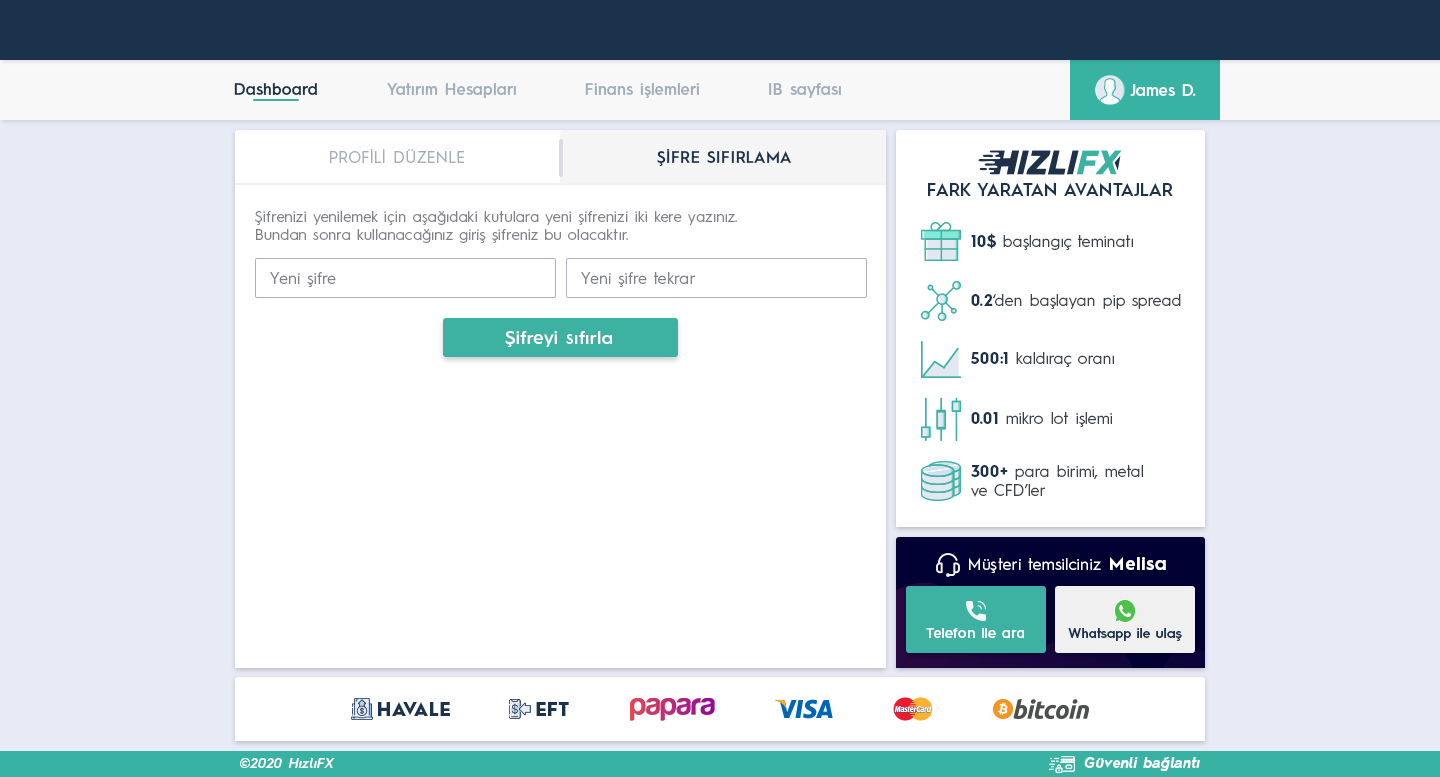
<style>
.page{position:relative;width:1440px;height:777px;background:#ffffff}
.page>*{position:absolute;margin:0}
.t1{font:16px "HurmeGeometricSans3-SemiBold";color:#1a324c}
.t2{font:16px "HurmeGeometricSans3-SemiBold";color:#a1adbb}
.t3{font:16px "HurmeGeometricSans3-SemiBold";color:#fefefe}
.t4{font:16px "HurmeGeometricSans1-Regular";letter-spacing:0.01em;color:#a1adbb}
.t5{font:16px "HurmeGeometricSans1-SemiBold";letter-spacing:0.01em;color:#1a324c}
.t6{font:18px "HurmeGeometricSans1-SemiBold";color:#1a324c}
.t7{font:15px "HurmeGeometricSans1-Regular";letter-spacing:0.01em;color:#7f8389}
.t8{font:16px "HurmeGeometricSans1-Regular";color:#3a4149}
.t9{font:16px "HurmeGeometricSans1-Bold";color:#1a324c}
.t10{font:16px "HurmeGeometricSans1-Regular";letter-spacing:0.01em;color:#7f8389}
.t11{font:18px "HurmeGeometricSans1-SemiBold";letter-spacing:0.025em;color:#ffffff}
.t12{font:16px "HurmeGeometricSans1-Regular";letter-spacing:0.025em;color:#ffffff}
.t13{font:18px "HurmeGeometricSans1-Bold";letter-spacing:0.05em;color:#ffffff}
.t14{font:14px "HurmeGeometricSans3-SemiBold";letter-spacing:0.01em;color:#ffffff}
.t15{font:13.5px "HurmeGeometricSans3-SemiBold";letter-spacing:0.01em;color:#1a324c}
.t16{font:18px "HurmeGeometricSans1-Black";letter-spacing:0.025em;color:#1a324c}
.t17{font:14px "HurmeGeometricSans2-SemiBoldObl";letter-spacing:0.025em;color:#ffffff}
.t18{font:14px "HurmeGeometricSans2-BoldObl";letter-spacing:0.025em;color:#ffffff}
</style>
<div class="page">
<p class="t1" style="left:234px;top:83px;width:83px;height:12px">Dashboard</p>
<p class="t2" style="left:387px;top:83px;width:129px;height:15px">Yatırım Hesapları</p>
<p class="t2" style="left:585px;top:83px;width:114px;height:15px">Finans işlemleri</p>
<p class="t2" style="left:769px;top:83px;width:72px;height:15px">IB sayfası</p>
<p class="t3" style="left:1130px;top:84px;width:66px;height:12px">James D.</p>
<p class="t4" style="left:330px;top:149px;width:135px;height:14px">PROFİLİ DÜZENLE</p>
<p class="t5" style="left:657px;top:148px;width:135px;height:18px">ŞİFRE SIFIRLAMA</p>
<p class="t6" style="left:928px;top:183px;width:245px;height:13px">FARK YARATAN AVANTAJLAR</p>
<p class="t7" style="left:255px;top:211px;width:482px;height:32px">Şifrenizi yenilemek için aşağıdaki kutulara yeni şifrenizi iki kere yazınız.<br>Bundan sonra kullanacağınız giriş şifreniz bu olacaktır.</p>
<p class="t8" style="left:971px;top:233px;width:162px;height:17px"><span class="t9">10$</span> başlangıç teminatı</p>
<p class="t10" style="left:270px;top:272px;width:66px;height:15px">Yeni şifre</p>
<p class="t10" style="left:581px;top:272px;width:114px;height:15px">Yeni şifre tekrar</p>
<p class="t8" style="left:971px;top:294px;width:210px;height:15px"><span class="t9">0.2</span>‘den başlayan pip spread</p>
<p class="t11" style="left:505px;top:331px;width:107px;height:16px">Şifreyi sıfırla</p>
<p class="t8" style="left:970px;top:352px;width:144px;height:15px"><span class="t9">500:1</span> kaldıraç oranı</p>
<p class="t8" style="left:971px;top:412px;width:141px;height:15px"><span class="t9">0.01</span> mikro lot işlemi</p>
<p class="t8" style="left:971px;top:465px;width:172px;height:32px"><span class="t9">300+</span> para birimi, metal<br>ve CFD’ler</p>
<p class="t12" style="left:969px;top:557px;width:197px;height:16px">Müşteri temsilciniz <span class="t13">Melisa</span></p>
<p class="t14" style="left:926px;top:628px;width:98px;height:10px">Telefon ile ara</p>
<p class="t15" style="left:1068px;top:628px;width:114px;height:13px">Whatsapp ile ulaş</p>
<p class="t16" style="left:378px;top:702px;width:72px;height:14px">HAVALE</p>
<p class="t16" style="left:536px;top:702px;width:33px;height:14px">EFT</p>
<p class="t17" style="left:240px;top:758px;width:95px;height:10px">©2020 HızlıFX</p>
<p class="t18" style="left:1084px;top:757px;width:116px;height:15px">Güvenli bağlantı</p>
</div>
